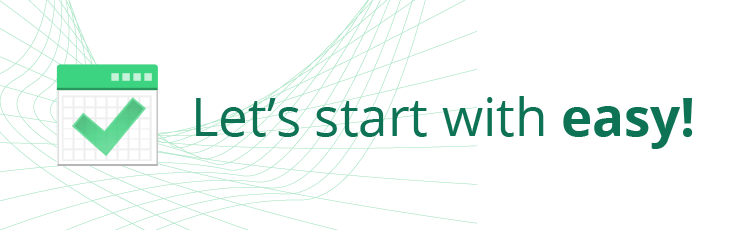
<style>
.page{position:relative;width:750px;height:230px;background:#ffffff}
.page>*{position:absolute;margin:0}
.t1{font:52.8px "OpenSans";color:#0e7355}
.t2{font:52.8px "OpenSans-Bold";color:#0e7355}
</style>
<div class="page">
<p class="t1" style="left:196px;top:96px;width:497px;height:53px">Let’s start with <span class="t2">easy!</span></p>
</div>
